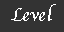
<style>
.page{position:relative;width:64px;height:32px;background:#333333}
.page>*{position:absolute;margin:0}
.t1{font:19.9px "Apple-Chancery";color:#ffffff}
</style>
<div class="page">
<p class="t1" style="left:11px;top:4px;width:45px;height:17px">Level</p>
</div>
